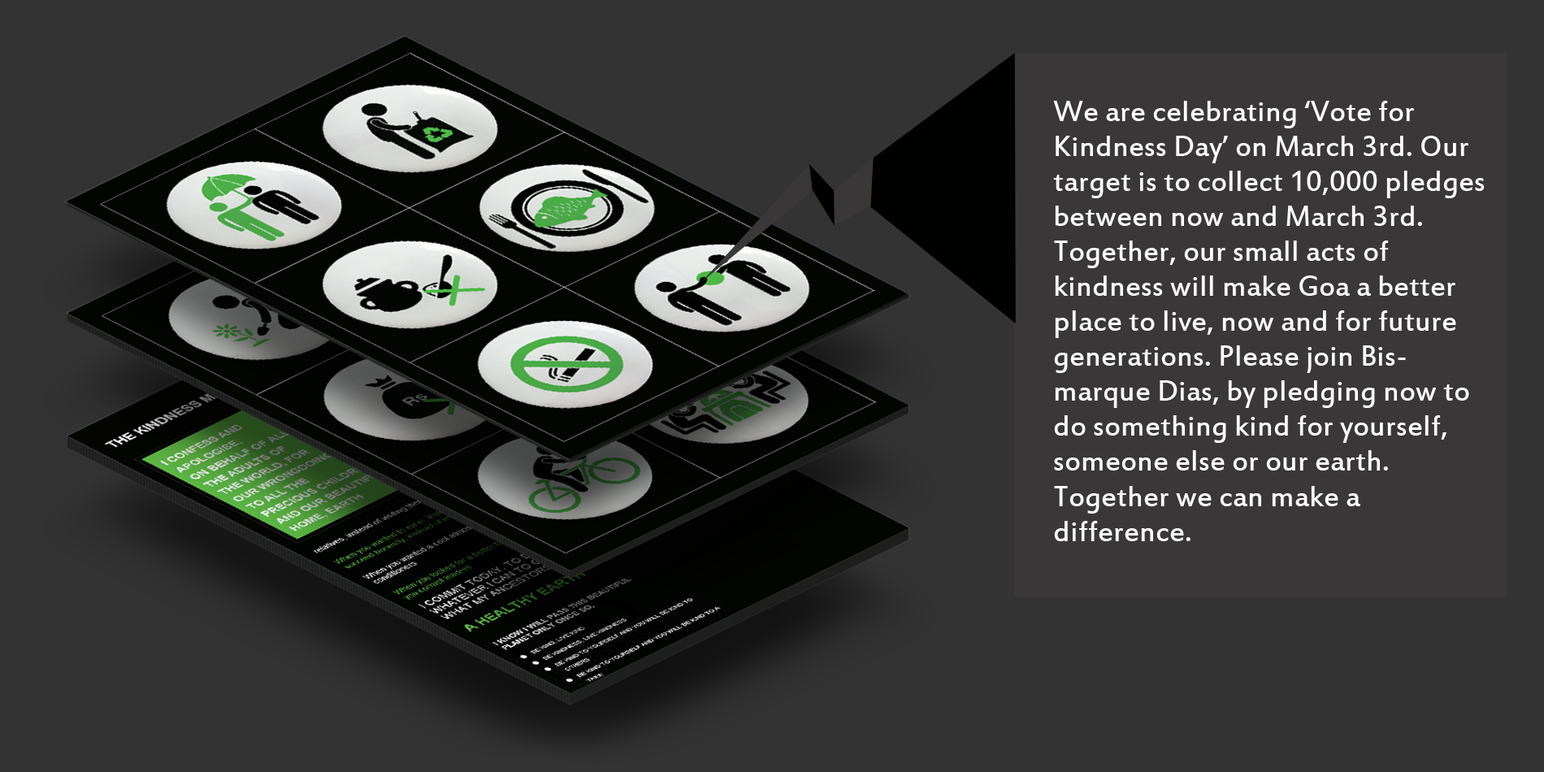
<style>
.page{position:relative;width:1544px;height:772px;background:#333333}
.page>*{position:absolute;margin:0}
.t1{font:31.7px/35px "EstrangeloEdessa";color:#ffffff}
</style>
<div class="page">
<p class="t1" style="left:1053px;top:101px;width:432px;height:440px">We are celebrating ‘Vote for Kindness Day’ on March 3rd. Our target is to collect 10,000 pledges between now and March 3rd. Together, our small acts of kindness will make Goa a better place to live, now and for future generations. Please join Bismarque Dias, by pledging now to do something kind for yourself, someone else or our earth. Together we can make a <br>difference.</p>
</div>
